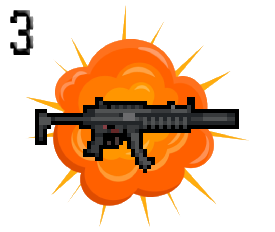
<style>
.page{position:relative;width:275px;height:232px;background:#ffffff}
.page>*{position:absolute;margin:0}
.t1{font:80px "VT323-Regular"}
.t2{font:24px "DelaGothicOne-Regular"}
</style>
<div class="page">
<p class="t1" style="left:10px;top:10px;width:24px;height:45px"><span class="t2"><br></span>3</p>
</div>
